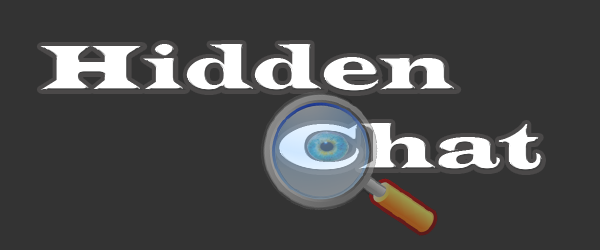
<style>
.page{position:relative;width:600px;height:250px;background:#333333}
.page>*{position:absolute;margin:0}
.t1{font:66px "LatinWide";color:#ffffff}
</style>
<div class="page">
<p class="t1" style="left:40px;top:44px;width:502px;height:127px">Hidden<br>            Chat</p>
</div>
